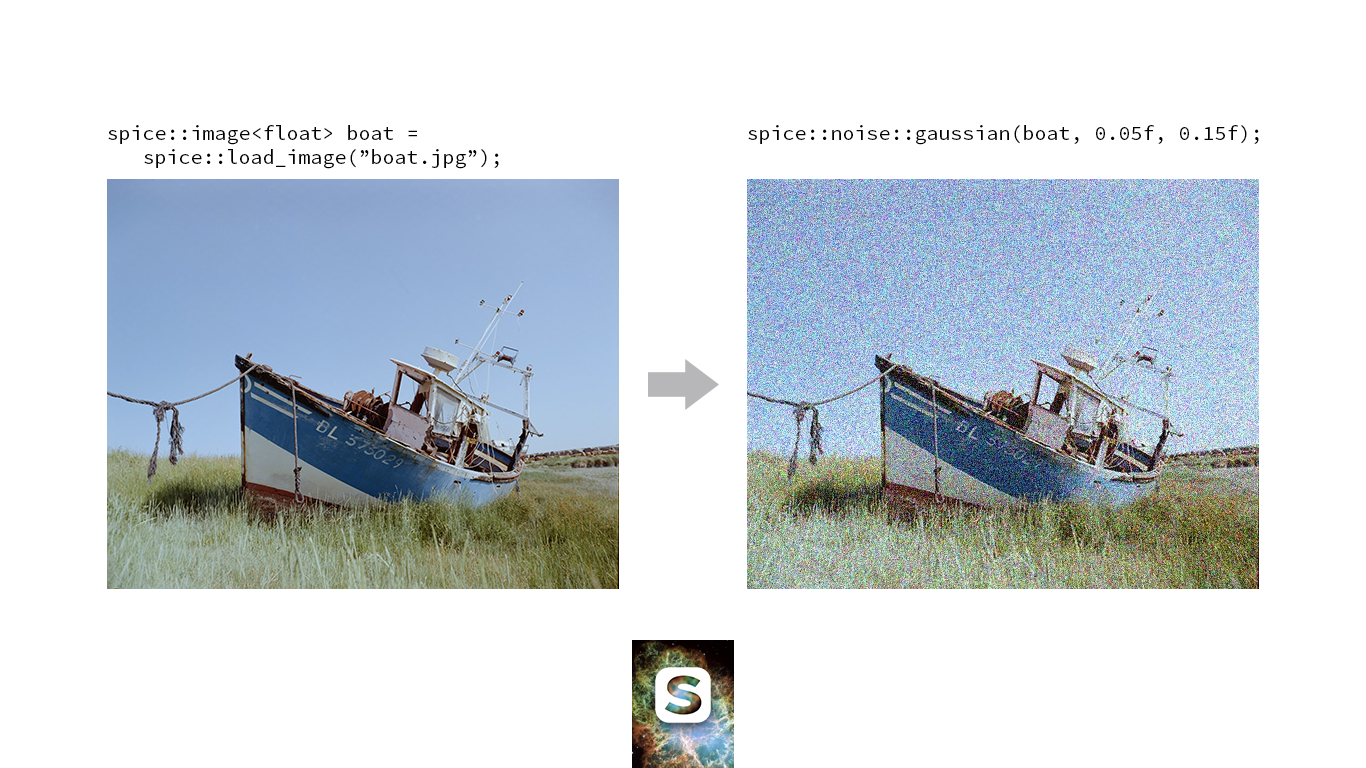
<style>
.page{position:relative;width:1366px;height:768px;background:#ffffff}
.page>*{position:absolute;margin:0}
.t1{font:20px "SourceCodePro-Regular";color:#000000}
</style>
<div class="page">
<p class="t1" style="left:108px;top:125px;width:391px;height:44px">spice::image&lt;float&gt; boat =<br> spice::load_image(”boat.jpg”);</p>
<p class="t1" style="left:748px;top:125px;width:511px;height:20px">spice::noise::gaussian(boat, 0.05f, 0.15f);</p>
</div>
